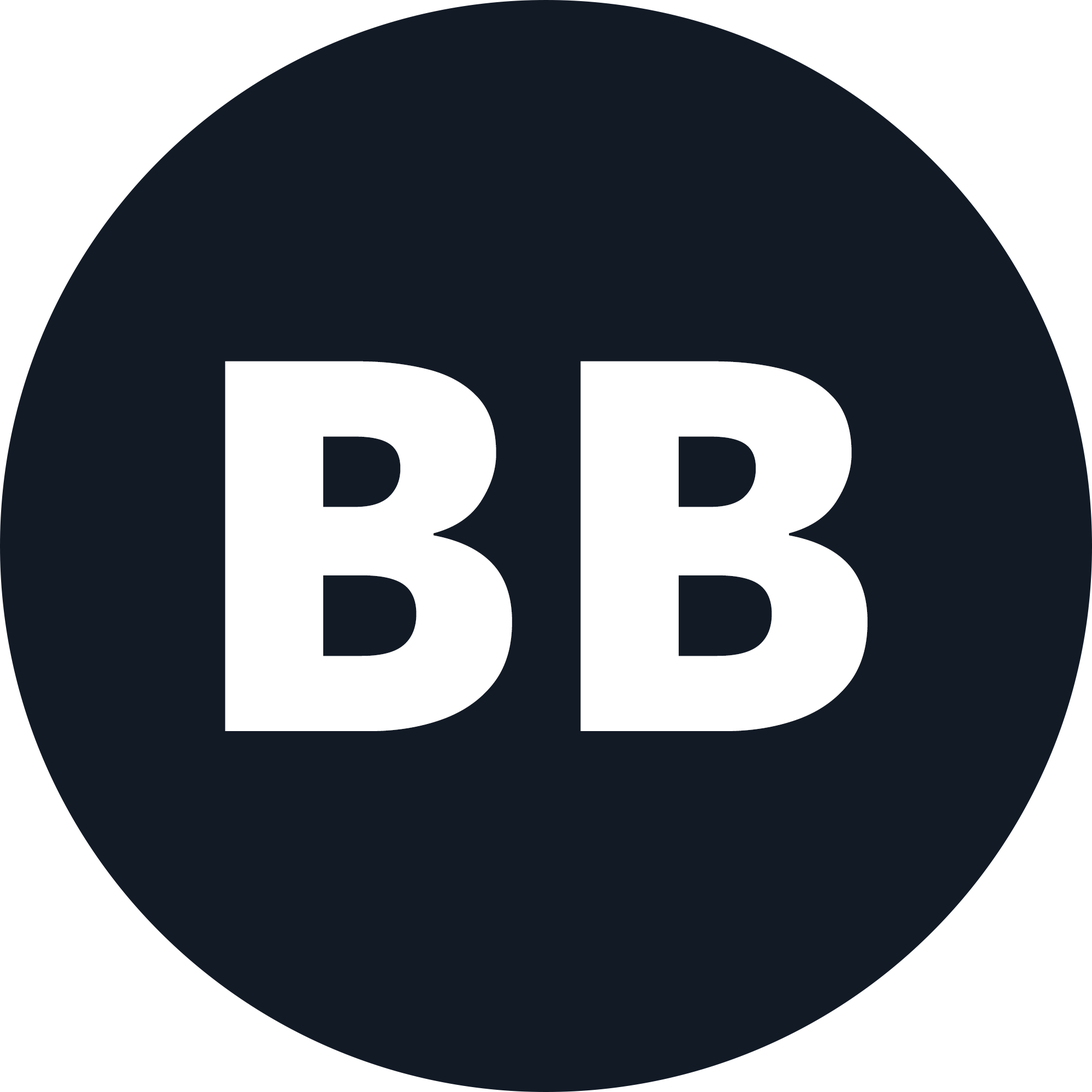
<style>
.page{position:relative;width:1092px;height:1092px;background:#121a26}
.page>*{position:absolute;margin:0}
.t1{font:568.7px "SourceCodeProExtraLight-Black";letter-spacing:0.025em;color:#ffffff}
</style>
<div class="page">
<p class="t1" style="left:225px;top:361px;width:643px;height:370px">BB</p>
</div>
